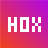
<style>
.page{position:relative;width:48px;height:48px}
.page>*{position:absolute;margin:0}
.t1{font:30px "Pixelzim-3x5";letter-spacing:-0.1em;color:#ffffff;text-transform:uppercase}
</style>
<div class="page">
<p class="t1" style="left:8px;top:17px;width:33px;height:15px">hox</p>
</div>
